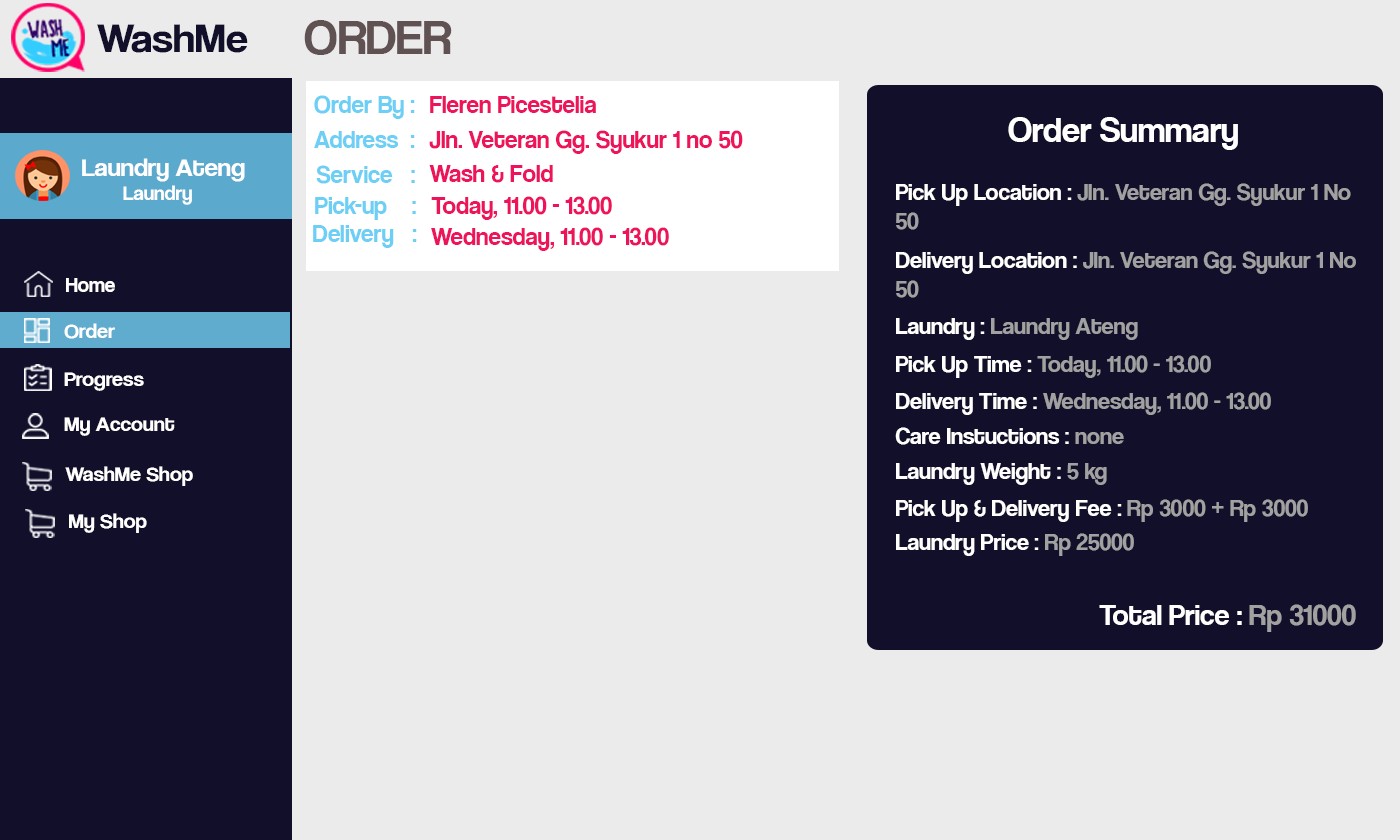
<style>
.page{position:relative;width:1400px;height:840px;background:#ebebeb}
.page>*{position:absolute;margin:0}
.t1{font:42.1px "CoolveticaRg-Regular";color:#120f2b;scale:1.05 1}
.t2{font:50px "CoolveticaRg-Regular";color:#605252}
.t3{font:25px "CoolveticaRg-Regular";color:#6dcff6}
.t4{font:25px "CoolveticaRg-Regular";color:#ed145b}
.t5{font:36px "CoolveticaRg-Regular";color:#ffffff}
.t6{font:25.2px "CoolveticaRg-Regular";color:#ffffff;scale:1.05 1}
.t7{font:20px "CoolveticaRg-Regular";color:#ffffff;scale:1.05 1}
.t8{font:24px "CoolveticaRg-Regular";color:#a1a1a1}
.t9{font:24px "CoolveticaRg-Regular";color:#ffffff}
.t10{font:21px "CoolveticaRg-Regular";color:#ffffff}
.t11{font:21px "CoolveticaRg-Regular";color:#ffffff;scale:1.05 1}
.t12{font:30px "CoolveticaRg-Regular";color:#ffffff}
.t13{font:30px "CoolveticaRg-Regular";color:#a1a1a1}
</style>
<div class="page">
<p class="t1" style="left:97px;top:24px;width:151px;height:29px">WashMe</p>
<p class="t2" style="left:304px;top:20px;width:148px;height:35px">ORDER</p>
<p class="t3" style="left:314px;top:95px;width:101px;height:24px">Order By :</p>
<p class="t4" style="left:430px;top:96px;width:166px;height:17px">Fleren Picestelia</p>
<p class="t5" style="left:1008px;top:117px;width:230px;height:33px">Order Summary</p>
<p class="t3" style="left:314px;top:131px;width:101px;height:17px">Address  :</p>
<p class="t4" style="left:429px;top:130px;width:314px;height:24px">Jln. Veteran Gg. Syukur 1 no 50</p>
<p class="t6" style="left:82px;top:158px;width:163px;height:47px">Laundry Ateng<br><span class="t7">        Laundry</span></p>
<p class="t3" style="left:316px;top:165px;width:99px;height:19px">Service   :</p>
<p class="t4" style="left:429px;top:165px;width:124px;height:18px">Wash &amp; Fold</p>
<p class="t8" style="left:896px;top:183px;width:455px;height:47px"><span class="t9">Pick Up Location : </span>Jln. Veteran Gg. Syukur 1 No 50</p>
<p class="t3" style="left:315px;top:197px;width:101px;height:23px">Pick-up    :</p>
<p class="t4" style="left:431px;top:196px;width:181px;height:24px">Today, 11.00 - 13.00</p>
<p class="t3" style="left:313px;top:225px;width:104px;height:23px">Delivery   :</p>
<p class="t4" style="left:431px;top:227px;width:238px;height:24px">Wednesday, 11.00 - 13.00</p>
<p class="t8" style="left:896px;top:251px;width:460px;height:47px"><span class="t9">Delivery Location : </span>Jln. Veteran Gg. Syukur 1 No 50</p>
<p class="t10" style="left:66px;top:278px;width:49px;height:14px">Home</p>
<p class="t8" style="left:896px;top:318px;width:242px;height:22px"><span class="t9">Laundry : </span>Laundry Ateng</p>
<p class="t11" style="left:64px;top:323px;width:51px;height:16px">Order</p>
<p class="t8" style="left:896px;top:355px;width:315px;height:23px"><span class="t9">Pick Up Time : </span>Today, 11.00 - 13.00</p>
<p class="t11" style="left:64px;top:372px;width:80px;height:19px">Progress</p>
<p class="t8" style="left:896px;top:392px;width:375px;height:23px"><span class="t9">Delivery Time : </span>Wednesday, 11.00 - 13.00</p>
<p class="t11" style="left:64px;top:417px;width:111px;height:19px">My Account</p>
<p class="t9" style="left:895px;top:427px;width:229px;height:18px">Care Instuctions : <span class="t8">none</span></p>
<p class="t11" style="left:65px;top:466px;width:128px;height:20px">WashMe Shop</p>
<p class="t9" style="left:896px;top:463px;width:211px;height:22px">Laundry Weight : <span class="t8">5 kg</span></p>
<p class="t9" style="left:896px;top:499px;width:412px;height:23px">Pick Up &amp; Delivery Fee : <span class="t8">Rp 3000 + Rp 3000</span></p>
<p class="t11" style="left:69px;top:513px;width:78px;height:20px">My Shop</p>
<p class="t9" style="left:896px;top:533px;width:238px;height:23px">Laundry Price : <span class="t8">Rp 25000</span></p>
<p class="t12" style="left:1099px;top:604px;width:257px;height:28px">Total Price : <span class="t13">Rp 31000</span></p>
</div>
